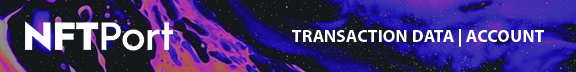
<style>
.page{position:relative;width:576px;height:72px}
.page>*{position:absolute;margin:0}
.t1{font:17.8px "MyriadPro-Bold";color:#ffffff}
</style>
<div class="page">
<p class="t1" style="left:292px;top:29px;width:252px;height:18px">TRANSACTION DATA | ACCOUNT</p>
</div>
